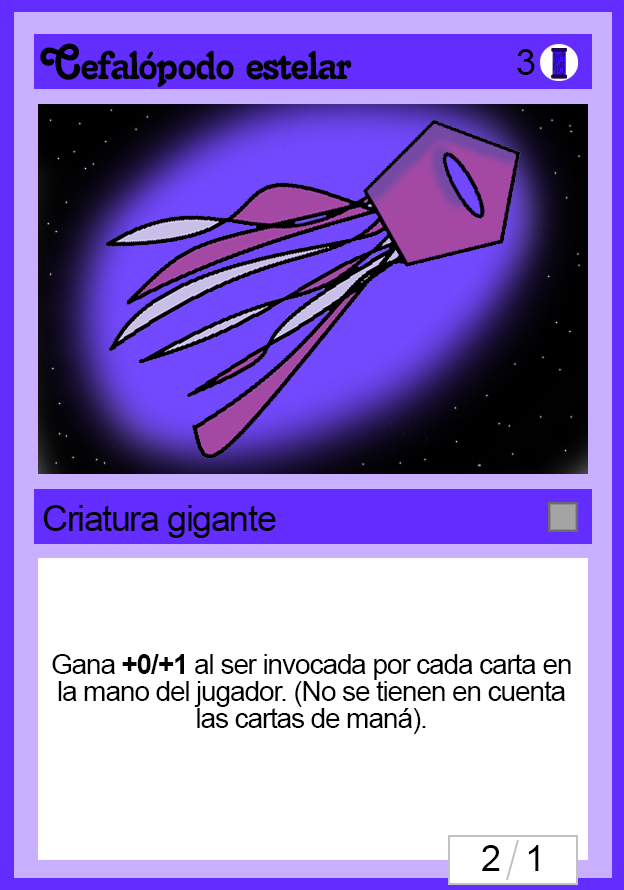
<style>
.page{position:relative;width:624px;height:890px;background:#ffffff}
.page>*{position:absolute;margin:0}
.t1{font:48px "Salina";letter-spacing:-0.04em;color:#000000}
.t2{font:36px "ArialMT";letter-spacing:-0.04em;color:#000000}
.t3{font:28px/27px "ArialMT";letter-spacing:-0.04em;color:#000000}
.t4{font:28px/27px "Arial-BoldMT";letter-spacing:-0.04em;color:#000000}
</style>
<div class="page">
<p class="t1" style="left:40px;top:43px;width:312px;height:45px">Cefalópodo estelar</p>
<p class="t2" style="left:517px;top:49px;width:18px;height:26px">3</p>
<p class="t2" style="left:43px;top:505px;width:233px;height:33px">Criatura gigante</p>
<p class="t3" style="left:52px;top:654px;width:519px;height:80px;text-align:center">Gana <span class="t4">+0/+1</span> al ser invocada por cada carta en la mano del jugador. (No se tienen en cuenta las cartas de maná).</p>
<p class="t2" style="left:482px;top:845px;width:57px;height:26px">2   1</p>
</div>
